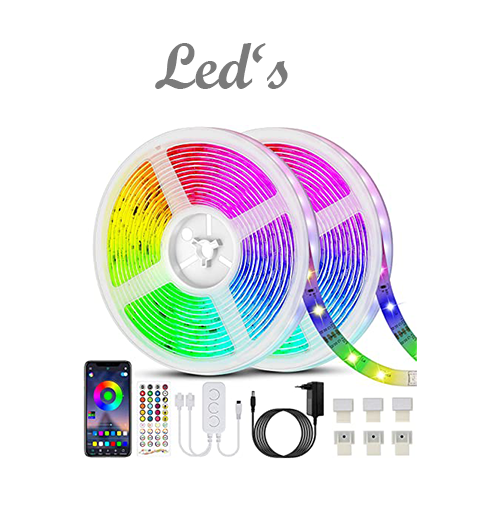
<style>
.page{position:relative;width:499px;height:526px;background:#ffffff}
.page>*{position:absolute;margin:0}
.t1{font:64px "ScriptMTBold";color:#7a7a7a}
</style>
<div class="page">
<p class="t1" style="left:155px;top:43px;width:133px;height:46px">Led‘s</p>
</div>
